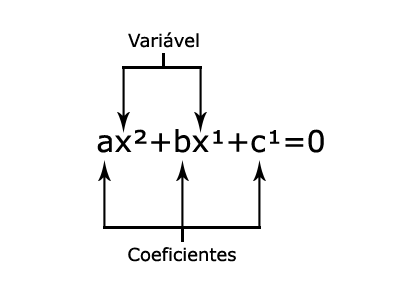
<style>
.page{position:relative;width:400px;height:300px;background:#ffffff}
.page>*{position:absolute;margin:0}
.t1{font:18px "Verdana";color:#000000}
.t2{font:30px "Verdana";color:#000000}
</style>
<div class="page">
<p class="t1" style="left:128px;top:32px;width:71px;height:16px">Variável</p>
<p class="t2" style="left:97px;top:129px;width:227px;height:24px">ax²+bx¹+c¹=0</p>
<p class="t1" style="left:128px;top:247px;width:108px;height:15px">Coeficientes</p>
</div>
